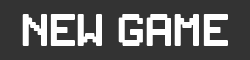
<style>
.page{position:relative;width:250px;height:60px;background:#333333}
.page>*{position:absolute;margin:0}
.t1{font:40px "PixelSplitter-Bold";color:#ffffff}
</style>
<div class="page">
<p class="t1" style="left:22px;top:14px;width:206px;height:32px">New Game</p>
</div>
